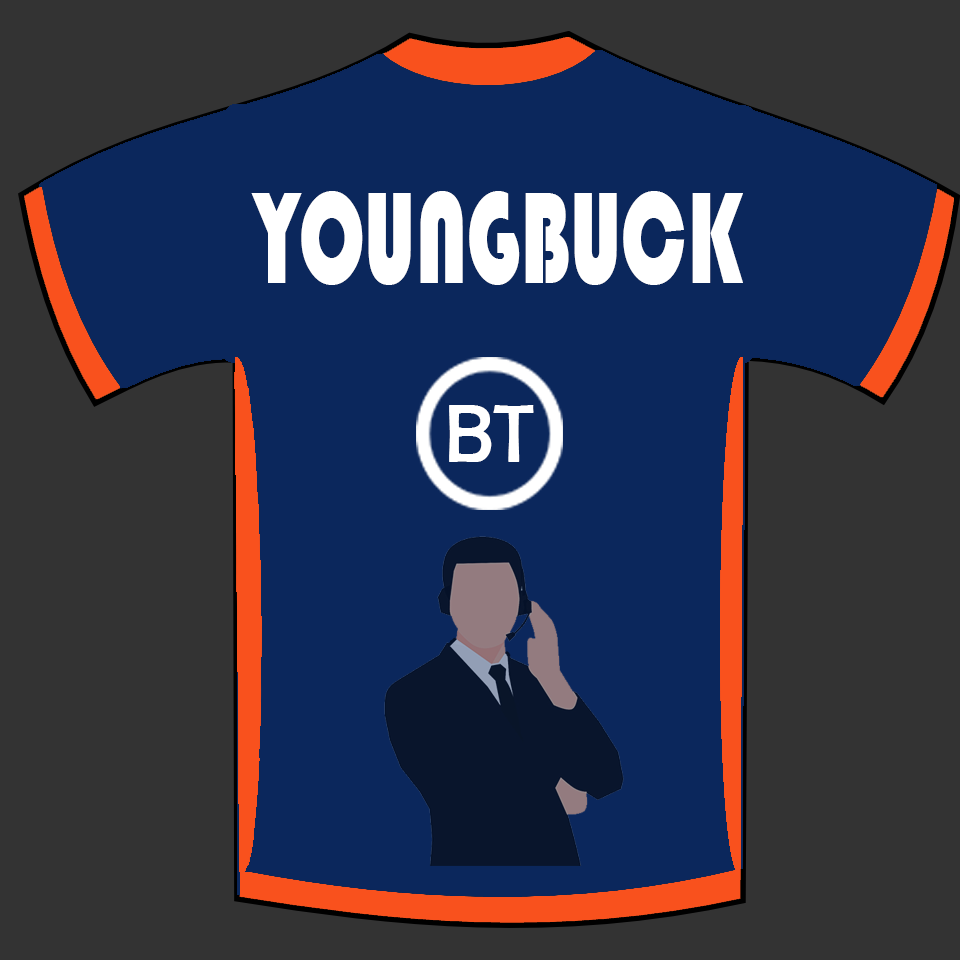
<style>
.page{position:relative;width:960px;height:960px;background:#333333}
.page>*{position:absolute;margin:0}
.t1{font:135.4px "Bauhaus93";color:#ffffff;scale:0.64 1}
.t2{font:83.3px "BerlinSansFB-Reg";color:#ffffff;scale:0.96 1}
</style>
<div class="page">
<p class="t1" style="left:251px;top:191px;width:492px;height:94px">YOUNGBUCK</p>
<p class="t2" style="left:449px;top:405px;width:85px;height:57px">BT</p>
</div>
